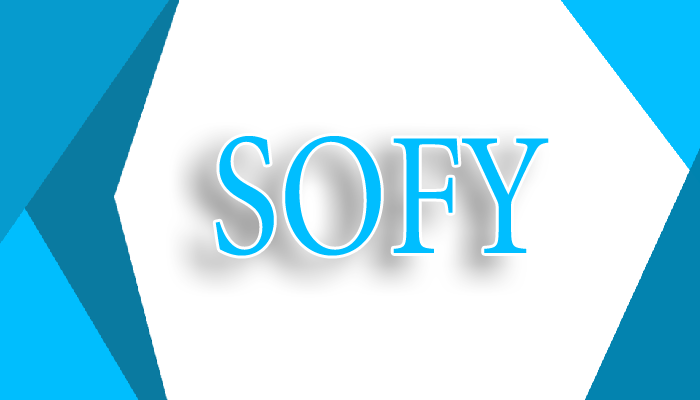
<style>
.page{position:relative;width:700px;height:400px;background:#ffffff}
.page>*{position:absolute;margin:0}
.t1{font:176.1px "Minion-Regular";color:#00beff;scale:0.82 1}
</style>
<div class="page">
<p class="t1" style="left:215px;top:136px;width:334px;height:120px">SOFY</p>
</div>
